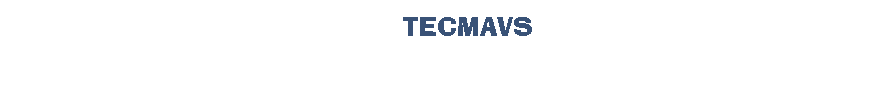
<style>
.page{position:relative;width:891px;height:96px;background:#ffffff}
.page>*{position:absolute;margin:0}
.t1{font:25px "AlorNormal";color:#395277;text-transform:uppercase}
</style>
<div class="page">
<p class="t1" style="left:403px;top:17px;width:129px;height:19px">TECMAVS</p>
</div>
